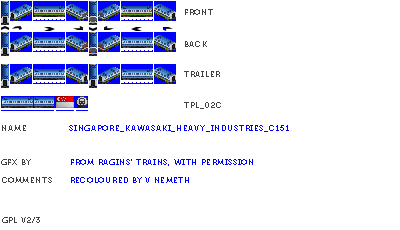
<style>
.page{position:relative;width:400px;height:230px;background:#ffffff}
.page>*{position:absolute;margin:0}
.t1{font:8px "Museo700-Regular";letter-spacing:0.075em;color:#404040;text-transform:uppercase}
.t2{font:8px "Museo700-Regular";letter-spacing:0.075em;color:#0000ff;text-transform:uppercase}
</style>
<div class="page">
<p class="t1" style="left:185px;top:9px;width:28px;height:6px">front</p>
<p class="t1" style="left:185px;top:41px;width:22px;height:6px">back</p>
<p class="t1" style="left:184px;top:71px;width:36px;height:6px">trailer</p>
<p class="t1" style="left:184px;top:102px;width:37px;height:7px">tpl_02c</p>
<p class="t1" style="left:2px;top:125px;width:24px;height:6px">name</p>
<p class="t2" style="left:69px;top:125px;width:220px;height:7px">Singapore_Kawasaki_Heavy_Industries_C151</p>
<p class="t1" style="left:1px;top:159px;width:30px;height:6px">gfx by</p>
<p class="t2" style="left:71px;top:159px;width:182px;height:7px">from ragins' trains, with permission</p>
<p class="t1" style="left:2px;top:177px;width:50px;height:6px">comments</p>
<p class="t2" style="left:71px;top:177px;width:118px;height:6px">recoloured by v nemeth</p>
<p class="t1" style="left:2px;top:217px;width:38px;height:6px">gpl v2/3</p>
</div>
